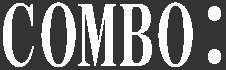
<style>
.page{position:relative;width:226px;height:70px;background:#333333}
.page>*{position:absolute;margin:0}
.t1{font:85px "HGMinchoE";color:#ffffff;scale:0.92 1}
</style>
<div class="page">
<p class="t1" style="left:3px;top:2px;width:218px;height:65px">COMBO:</p>
</div>
